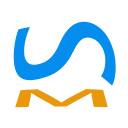
<style>
.page{position:relative;width:128px;height:128px;background:#ffffff}
.page>*{position:absolute;margin:0}
.t1{font:127.8px "AdobeHeitiStd-Regular";color:#058ded}
.t2{font:19.1px "AdobeHeitiStd-Regular";color:#e9980c;scale:6.69 1}
</style>
<div class="page">
<p class="t1" style="left:13px;top:21px;width:103px;height:65px">S</p>
<p class="t2" style="left:15px;top:89px;width:93px;height:19px">M</p>
</div>
